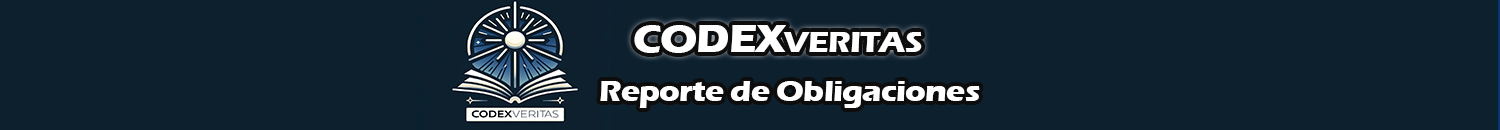
<style>
.page{position:relative;width:1500px;height:130px;background:#0d202e}
.page>*{position:absolute;margin:0}
.t1{font:30px "ErasITC-Bold";letter-spacing:-0.03em;color:#ffffff;scale:1.08 1}
.t2{font:40px "ErasITC-Bold";letter-spacing:-0.03em;color:#ffffff;scale:1.08 1}
</style>
<div class="page">
<p class="t1" style="left:634px;top:25px;width:288px;height:28px"><span class="t2">CODEX</span>VERITAS</p>
<p class="t1" style="left:600px;top:81px;width:380px;height:27px">Reporte de Obligaciones</p>
</div>
